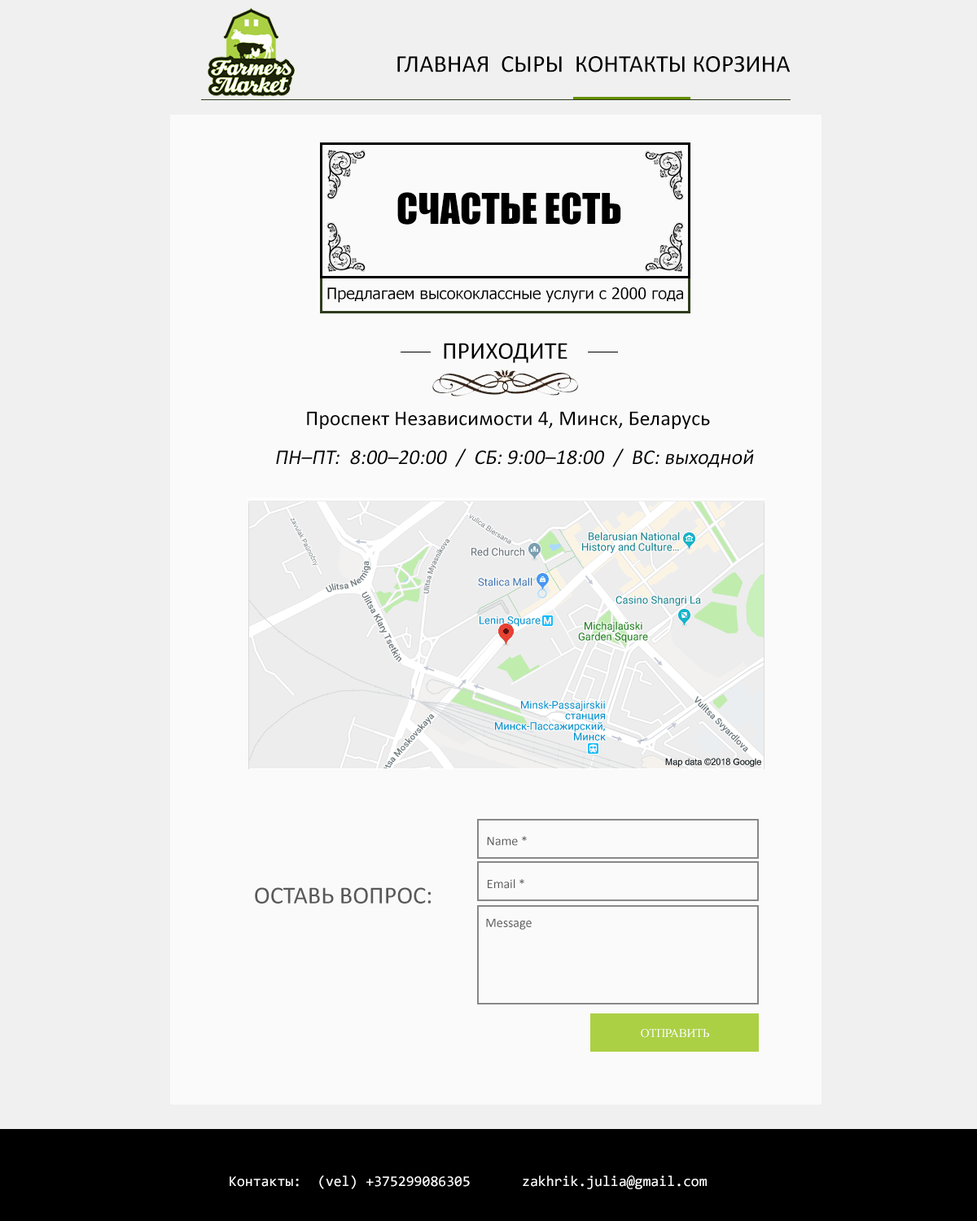
<style>
.page{position:relative;width:977px;height:1221px;background:#f0f0f0}
.page>*{position:absolute;margin:0}
.t1{font:24.4px "Calibri";color:#000000;text-transform:uppercase}
.t2{font:39.1px "Impact";color:#000000;text-transform:uppercase}
.t3{font:16px "Tahoma";color:#000000}
.t4{font:21.2px "Calibri";color:#000000}
.t5{font:21.2px "Calibri";color:#000000;font-style:italic}
.t6{font:13px "Calibri";color:#5a5959}
.t7{font:24.4px "Calibri";color:#5a5959;text-transform:uppercase}
.t8{font:11.9px "TimesNewRomanPSMT";color:#ffffff;text-transform:uppercase}
.t9{font:14.7px "Consolas";color:#ffffff}
</style>
<div class="page">
<p class="t1" style="left:397px;top:56px;width:393px;height:16px">Главная  сыры  контакты корзина</p>
<p class="t2" style="left:397px;top:192px;width:224px;height:33px">счастье есть</p>
<p class="t3" style="left:327px;top:287px;width:356px;height:16px">Предлагаем высококлассные услуги с 2000 года</p>
<p class="t1" style="left:444px;top:343px;width:123px;height:20px">приходите</p>
<p class="t4" style="left:307px;top:411px;width:403px;height:18px">Проспект Независимости 4, Минск, Беларусь</p>
<p class="t5" style="left:276px;top:448px;width:478px;height:20px">ПН–ПТ:  8:00–20:00  /  СБ: 9:00–18:00  /  ВС: выходной</p>
<p class="t6" style="left:487px;top:836px;width:40px;height:10px">Name *</p>
<p class="t6" style="left:488px;top:879px;width:36px;height:10px">Email *</p>
<p class="t7" style="left:255px;top:887px;width:176px;height:16px">Оставь вопрос:</p>
<p class="t6" style="left:486px;top:918px;width:45px;height:11px">Message</p>
<p class="t8" style="left:641px;top:1029px;width:68px;height:9px">отправить</p>
<p class="t9" style="left:230px;top:1175px;width:476px;height:14px">Контакты:  (vel) +375299086305  zakhrik.julia@gmail.com</p>
</div>
